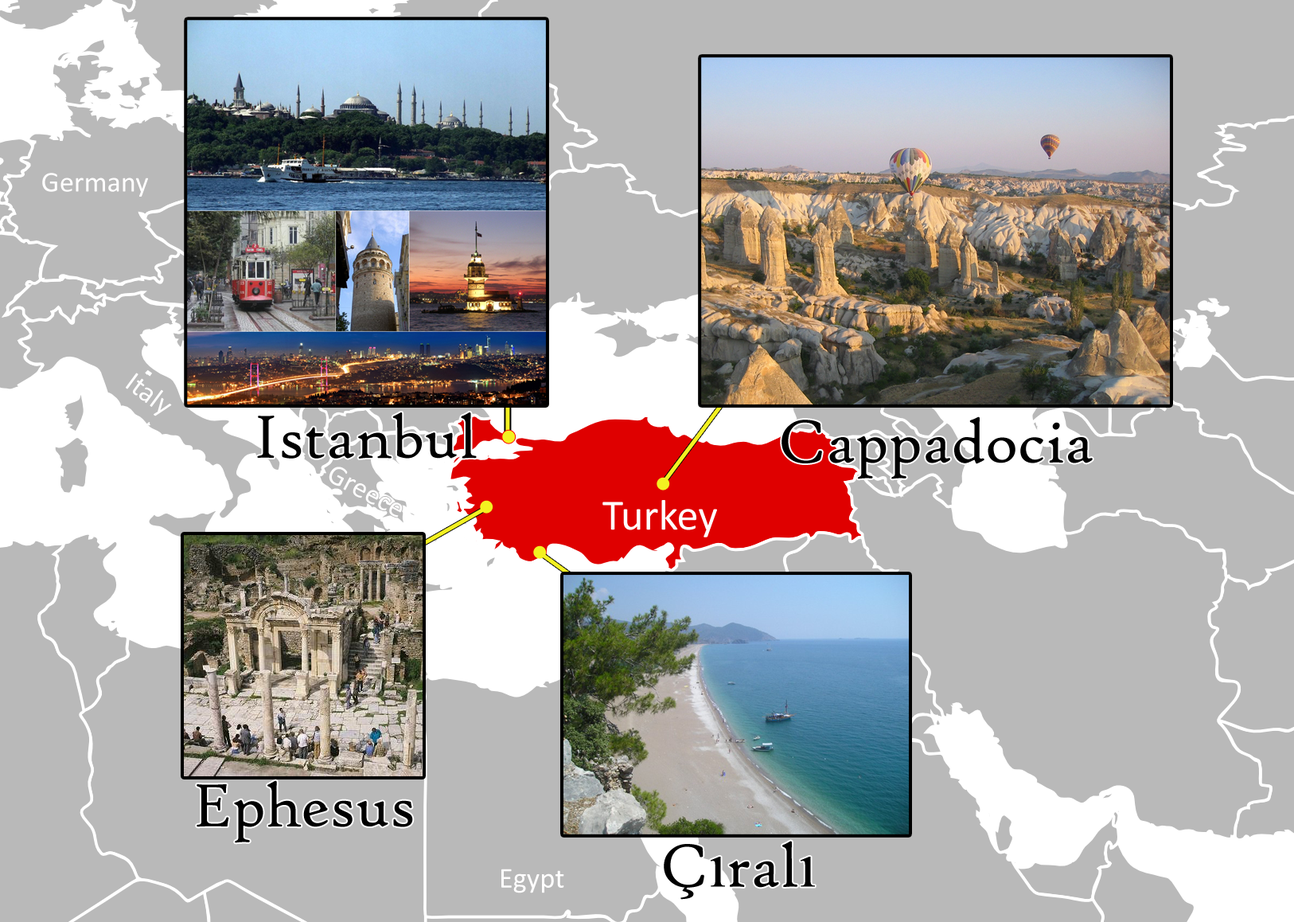
<style>
.page{position:relative;width:1294px;height:922px;background:#b9b9b9}
.page>*{position:absolute;margin:0}
.t1{font:28.9px "Calibri";color:#fffefe}
.t2{font:65px "HighTowerText-Reg";color:#000000}
.t3{font:43.3px "Calibri";color:#fffefe}
.t4{font:65px "TimesNewRomanPSMT";color:#000000}
</style>
<div class="page">
<p class="t1" style="left:42px;top:173px;width:106px;height:24px">Germany</p>
<p class="t1" style="left:126px;top:372px;width:46px;height:44px;rotate:36deg">Italy</p>
<p class="t2" style="left:257px;top:412px;width:220px;height:46px">Istanbul</p>
<p class="t2" style="left:781px;top:416px;width:312px;height:63px">Cappadocia</p>
<p class="t3" style="left:602px;top:500px;width:115px;height:37px">Turkey</p>
<p class="t2" style="left:197px;top:780px;width:216px;height:63px">Ephesus</p>
<p class="t2" style="left:664px;top:840px;width:151px;height:59px">Ç<span class="t4">ı</span>ral<span class="t4">ı</span></p>
<p class="t1" style="left:501px;top:868px;width:63px;height:25px">Egypt</p>
</div>
